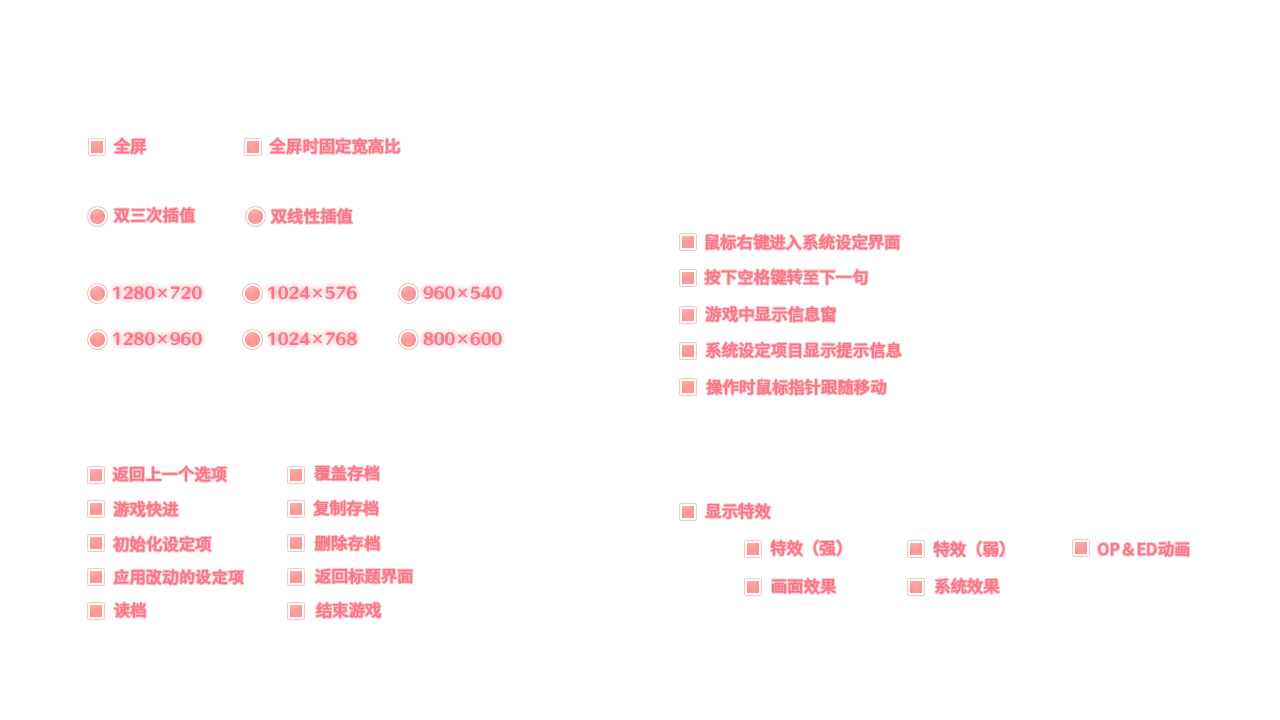
<style>
.page{position:relative;width:1280px;height:720px;background:#ffffff}
.page>*{position:absolute;margin:0}
.t1{font:16px "SourceHanSansSC-Regular";color:#f97887;font-weight:bold}
.t2{font:16px "AdobeHeitiStd-Regular";color:#f97887;font-weight:bold}
.t3{font:16px "AdobeFanHeitiStd-Bold";color:#f97887;font-weight:bold}
</style>
<div class="page">
<p class="t1" style="left:114px;top:137px;width:32px;height:17px">全屏</p>
<p class="t1" style="left:269px;top:137px;width:131px;height:17px">全屏时固定宽高比</p>
<p class="t1" style="left:113px;top:207px;width:82px;height:16px">双三次插值</p>
<p class="t1" style="left:271px;top:208px;width:82px;height:16px">双线性插值</p>
<p class="t1" style="left:705px;top:234px;width:195px;height:16px">鼠标右键进入系统设定界面</p>
<p class="t1" style="left:704px;top:269px;width:164px;height:16px">按下空格键转至下一句</p>
<p class="t1" style="left:705px;top:306px;width:131px;height:16px">游戏中显示信息窗</p>
<p class="t1" style="left:706px;top:342px;width:196px;height:16px">系统设定项目显示提示信息</p>
<p class="t1" style="left:706px;top:379px;width:180px;height:16px">操作时鼠标指针跟随移动</p>
<p class="t1" style="left:112px;top:466px;width:115px;height:16px">返回上一个选项</p>
<p class="t1" style="left:314px;top:465px;width:65px;height:16px">覆盖存档</p>
<p class="t1" style="left:113px;top:501px;width:66px;height:16px">游戏快进</p>
<p class="t1" style="left:313px;top:500px;width:65px;height:16px">复制存档</p>
<p class="t1" style="left:705px;top:503px;width:66px;height:16px">显示特效</p>
<p class="t1" style="left:113px;top:536px;width:99px;height:16px">初始化设定项</p>
<p class="t1" style="left:314px;top:535px;width:66px;height:16px">删除存档</p>
<p class="t1" style="left:770px;top:540px;width:72px;height:16px">特效（强）</p>
<p class="t1" style="left:933px;top:541px;width:72px;height:16px">特效（弱）</p>
<p class="t1" style="left:1098px;top:541px;width:91px;height:16px">OP＆ED动画</p>
<p class="t2" style="left:113px;top:569px;width:131px;height:16px">应<span class="t3">用改动</span>的设定项</p>
<p class="t1" style="left:315px;top:568px;width:98px;height:16px">返回标题界面</p>
<p class="t1" style="left:772px;top:578px;width:64px;height:16px">画面效果</p>
<p class="t1" style="left:935px;top:578px;width:65px;height:16px">系统效果</p>
<p class="t1" style="left:114px;top:602px;width:32px;height:16px">读档</p>
<p class="t1" style="left:316px;top:602px;width:65px;height:16px">结束游戏</p>
</div>
